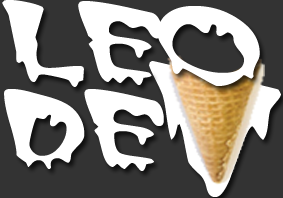
<style>
.page{position:relative;width:283px;height:198px;background:#333333}
.page>*{position:absolute;margin:0}
.t1{font:96.9px "MATTEROFFACT";color:#ffffff;scale:1.22 1}
.t2{font:146.2px "MATTEROFFACT";scale:0.95 1}
.t3{font:93.4px "MATTEROFFACT";color:#ffffff;scale:1.2 1}
</style>
<div class="page">
<p class="t1" style="left:2px;top:0px;width:258px;height:87px">LEO</p>
<p class="t2" style="left:149px;top:61px;width:132px;height:136px">V</p>
<p class="t3" style="left:4px;top:89px;width:160px;height:82px">DE</p>
</div>
